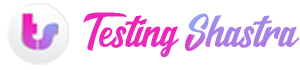
<style>
.page{position:relative;width:300px;height:70px;background:#ffffff}
.page>*{position:absolute;margin:0}
.t1{font:40.4px "Salikin";scale:0.84 1}
</style>
<div class="page">
<p class="t1" style="left:83px;top:12px;width:216px;height:46px">Testing Shastra</p>
</div>
